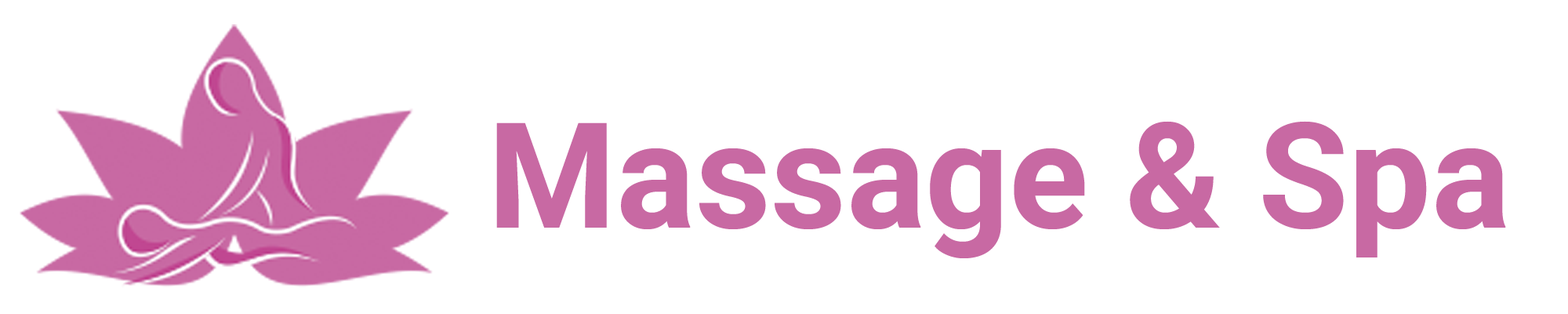
<style>
.page{position:relative;width:1568px;height:314px;background:#ffffff}
.page>*{position:absolute;margin:0}
.t1{font:147px "Roboto-Bold";color:#c869a3}
</style>
<div class="page">
<p class="t1" style="left:496px;top:121px;width:1010px;height:137px">Massage &amp; Spa</p>
</div>
